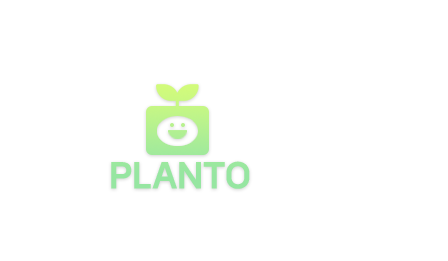
<style>
.page{position:relative;width:448px;height:261px;background:#ffffff}
.page>*{position:absolute;margin:0}
.t1{font:32px "NanumSquareNeoTTF-eHv";color:#96e6a1}
</style>
<div class="page">
<p class="t1" style="left:111px;top:161px;width:139px;height:28px">PLANTO</p>
</div>
